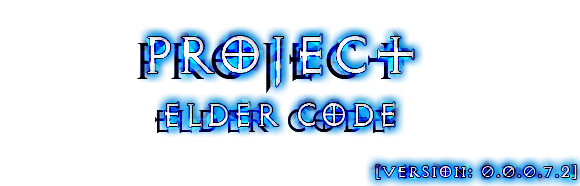
<style>
.page{position:relative;width:580px;height:186px;background:#ffffff}
.page>*{position:absolute;margin:0}
.t1{font:60px "DiabloLight";color:#f0f1f4}
.t2{font:36px "DiabloLight";color:#ebebf0}
.t3{font:18px "DiabloLight";color:#ebebeb}
</style>
<div class="page">
<p class="t1" style="left:147px;top:34px;width:267px;height:53px">Project</p>
<p class="t2" style="left:165px;top:102px;width:230px;height:25px">Elder Code</p>
<p class="t3" style="left:376px;top:165px;width:201px;height:14px">[Version: 0.0.0.7.2]</p>
</div>
